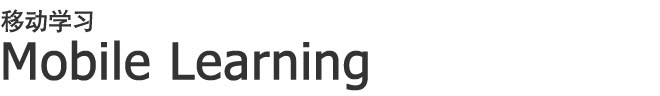
<style>
.page{position:relative;width:660px;height:96px;background:#ffffff}
.page>*{position:absolute;margin:0}
.t1{font:24px "HeitiCSEG-Medium-GB";color:#333333}
.t2{font:51px "Tahoma";color:#333333;font-weight:bold}
</style>
<div class="page">
<p class="t1" style="left:1px;top:9px;width:92px;height:24px">移动学习</p>
<p class="t2" style="left:3px;top:40px;width:365px;height:51px">Mobile Learning</p>
</div>
